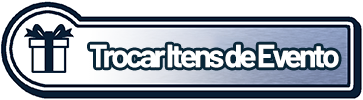
<style>
.page{position:relative;width:363px;height:100px;background:#ffffff}
.page>*{position:absolute;margin:0}
.t1{font:32px "Barlow-Bold";letter-spacing:-0.1em;color:#ffffff}
</style>
<div class="page">
<p class="t1" style="left:90px;top:44px;width:249px;height:24px">Trocar Itens de Evento</p>
</div>
